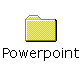
<style>
.page{position:relative;width:80px;height:80px;background:#ffffff}
.page>*{position:absolute;margin:0}
.t1{font:14px "MSReferenceSansSerif";color:#000000}
</style>
<div class="page">
<p class="t1" style="left:3px;top:48px;width:76px;height:13px">Powerpoint</p>
</div>
